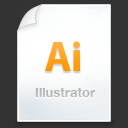
<style>
.page{position:relative;width:128px;height:128px;background:#333333}
.page>*{position:absolute;margin:0}
.t1{font:42px "MyriadPro-Bold"}
.t2{font:13px "HelveticaNeue-Bold";color:#cccccc}
</style>
<div class="page">
<p class="t1" style="left:45px;top:41px;width:35px;height:30px">Ai</p>
<p class="t2" style="left:35px;top:88px;width:61px;height:9px">Illustrator</p>
</div>
